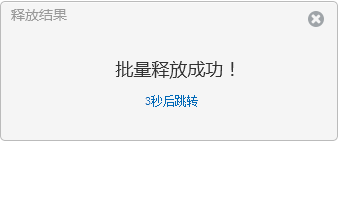
<style>
.page{position:relative;width:338px;height:203px;background:#f5f5f5}
.page>*{position:absolute;margin:0}
.t1{font:14px "MicrosoftYaHei";color:#999999}
.t2{font:18px "MicrosoftYaHei";color:#333333}
.t3{font:12px "NSimSun";color:#0068b7}
</style>
<div class="page">
<p class="t1" style="left:11px;top:9px;width:56px;height:12px">释放结果</p>
<p class="t2" style="left:115px;top:61px;width:119px;height:18px">批量释放成功！</p>
<p class="t3" style="left:145px;top:95px;width:53px;height:12px">3秒后跳转</p>
</div>
